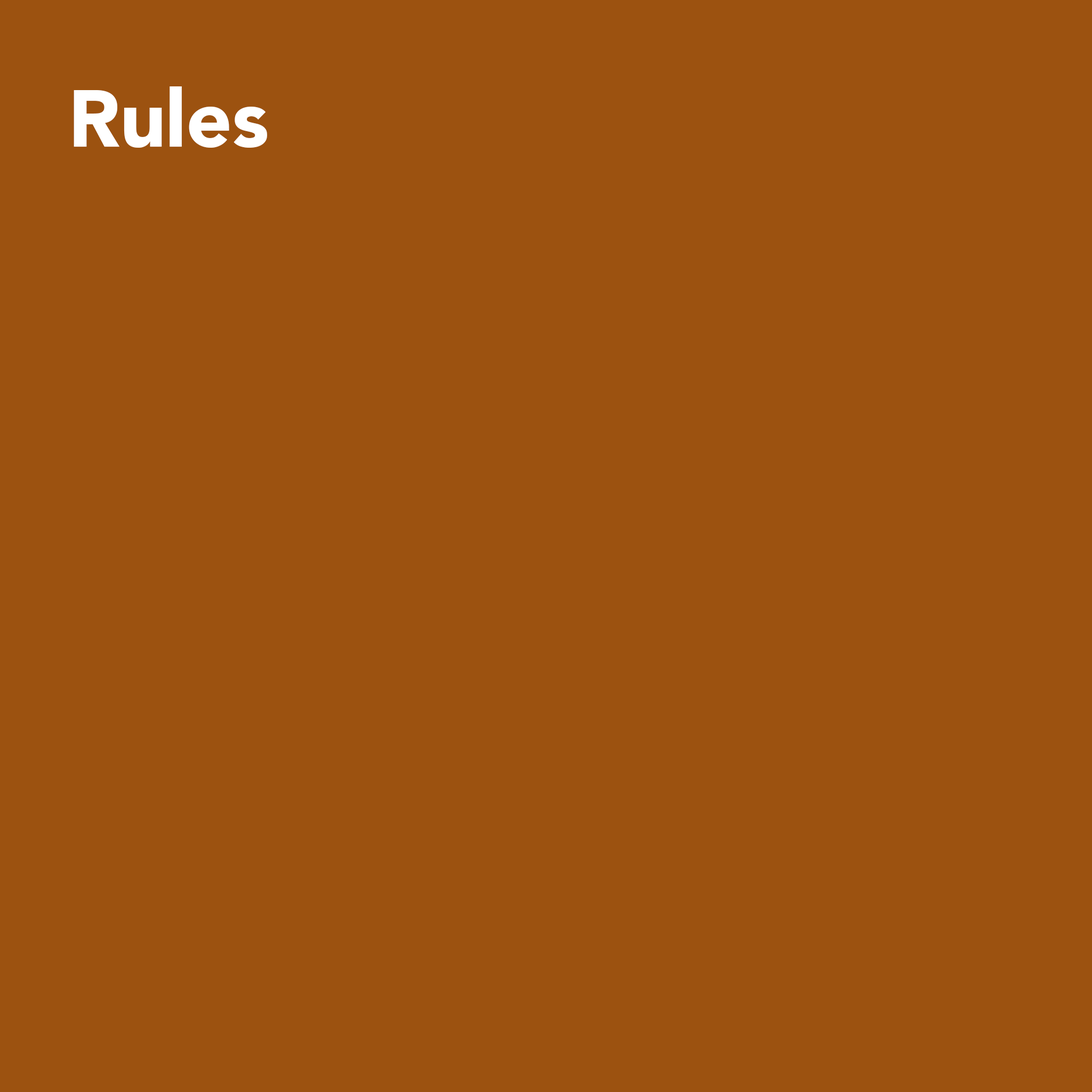
<style>
.page{position:relative;width:1092px;height:1092px;background:#9c5210}
.page>*{position:absolute;margin:0}
.t1{font:80px "AvenirLT-Black";color:#ffffff}
</style>
<div class="page">
<p class="t1" style="left:74px;top:86px;width:193px;height:62px">Rules</p>
</div>
